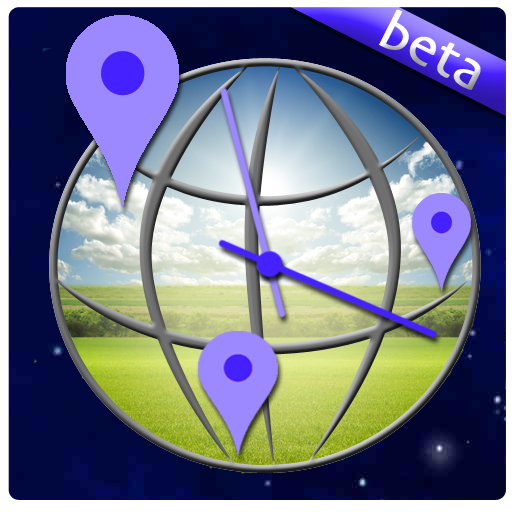
<style>
.page{position:relative;width:512px;height:512px}
.page>*{position:absolute;margin:0}
.t1{font:54.2px "Skia-Regular";color:#fefefe;font-weight:bold}
</style>
<div class="page">
<p class="t1" style="left:379px;top:9px;width:102px;height:81px;rotate:27deg">beta</p>
</div>
